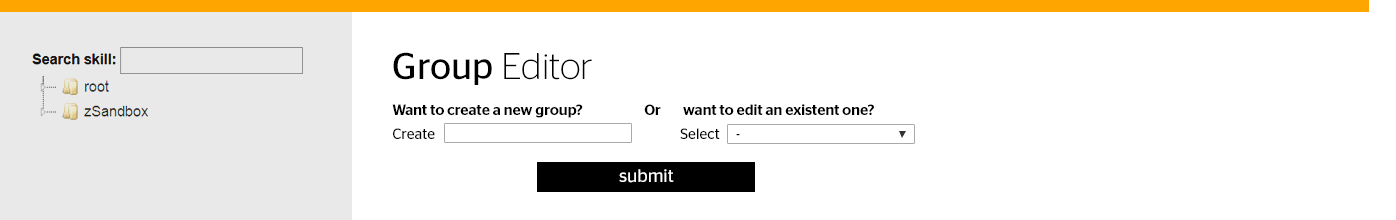
<style>
.page{position:relative;width:1396px;height:220px;background:#ffffff}
.page>*{position:absolute;margin:0}
.t1{font:37.1px "ContinentalStagSans-Light";color:#000000}
.t2{font:37.1px "ContinentalStagSans-Book";color:#000000}
.t3{font:15px "ContinentalStagSans-Medium";color:#000000}
.t4{font:15px "ContinentalStagSans-Book";color:#000000}
.t5{font:18.1px "ContinentalStagSans-Book";color:#ffffff}
</style>
<div class="page">
<p class="t1" style="left:393px;top:52px;width:199px;height:33px"><span class="t2">Group </span>Editor</p>
<p class="t3" style="left:392px;top:104px;width:482px;height:14px">Want to create a new group?  Or  want to edit an existent one?</p>
<p class="t4" style="left:393px;top:128px;width:347px;height:11px">Create        Select     -</p>
<p class="t5" style="left:619px;top:169px;width:55px;height:14px">submit</p>
</div>
